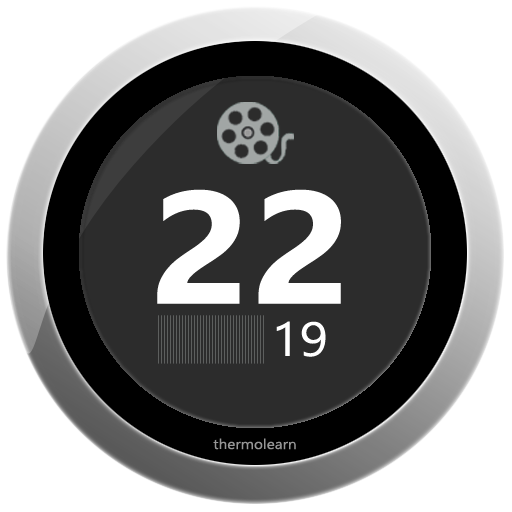
<style>
.page{position:relative;width:512px;height:512px;background:#ffffff}
.page>*{position:absolute;margin:0}
.t1{font:160px "KhmerUI-Bold";color:#ffffff;scale:1.1 1}
.t2{font:48px "KhmerUI";color:#ffffff;scale:1.1 1}
.t3{font:14px "KhmerUI";color:#969696;scale:1.1 1}
</style>
<div class="page">
<p class="t1" style="left:157px;top:189px;width:184px;height:115px">22</p>
<p class="t2" style="left:276px;top:321px;width:50px;height:36px">19</p>
<p class="t3" style="left:213px;top:438px;width:83px;height:12px">thermolearn</p>
</div>
